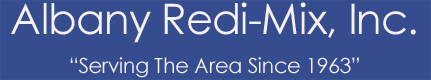
<style>
.page{position:relative;width:431px;height:80px;background:#354c8e}
.page>*{position:absolute;margin:0}
.t1{font:21.1px/38.6px "CenturyGothic";letter-spacing:-0.02em;color:#f5f1f1}
.t2{font:42.1px/38.6px "CenturyGothic";letter-spacing:-0.02em;color:#f5f1f1}
</style>
<div class="page">
<p class="t1" style="left:11px;top:2px;width:405px;height:76px;text-align:center"><span class="t2">Albany Redi-Mix, Inc.<br></span>“Serving The Area Since 1963”</p>
</div>
